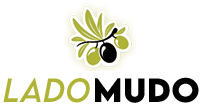
<style>
.page{position:relative;width:200px;height:108px;background:#ffffff}
.page>*{position:absolute;margin:0}
.t1{font:30px "LEMONMILK-RegularItalic";letter-spacing:0.02em;color:#b0b436}
.t2{font:30px "LEMONMILK-Bold";letter-spacing:0.02em;color:#000000}
</style>
<div class="page">
<p class="t1" style="left:3px;top:78px;width:87px;height:25px">Lado</p>
<p class="t2" style="left:95px;top:77px;width:104px;height:26px">Mudo</p>
</div>
